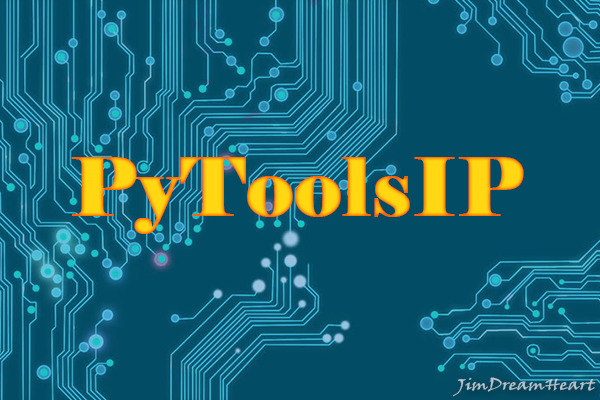
<style>
.page{position:relative;width:600px;height:400px;background:#034c65}
.page>*{position:absolute;margin:0}
.t1{font:80px "Elephant-Regular";color:#ff6102;font-weight:bold}
</style>
<div class="page">
<p class="t1" style="left:71px;top:157px;width:453px;height:77px">PyToolsIP</p>
</div>
